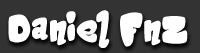
<style>
.page{position:relative;width:200px;height:53px;background:#333333}
.page>*{position:absolute;margin:0}
.t1{font:20px "MagicSound";letter-spacing:0.03em;color:#ffffff;font-weight:bold}
</style>
<div class="page">
<p class="t1" style="left:8px;top:10px;width:180px;height:38px">Daniel FnZ</p>
</div>
